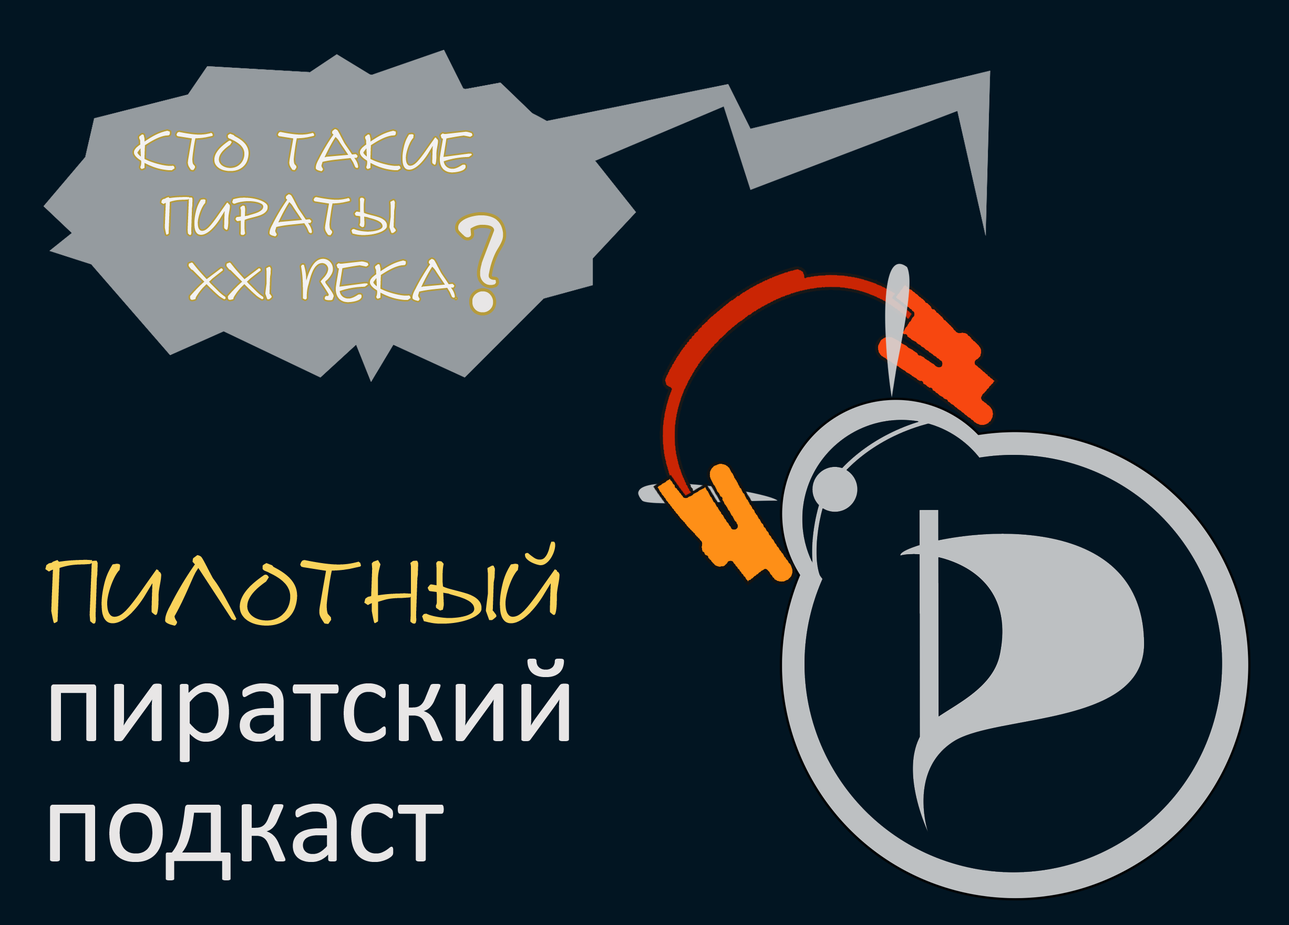
<style>
.page{position:relative;width:1289px;height:925px;background:#021522}
.page>*{position:absolute;margin:0}
.t1{font:53.9px "DSNote";color:#f3f2f2}
.t2{font:0.9px "DSNote";color:#f3f2f2}
.t3{font:131.3px "DSNote";color:#e8e6e6}
.t4{font:91px "DSNote";color:#fad35b}
.t5{font:121.5px "Calibri";color:#e8e6e6}
</style>
<div class="page">
<p class="t1" style="left:134px;top:129px;width:338px;height:174px">кто такие <br> пираты <br>  XXI века<span class="t2">?</span></p>
<p class="t3" style="left:458px;top:215px;width:45px;height:98px">?</p>
<p class="t4" style="left:45px;top:542px;width:515px;height:84px">Пилотный</p>
<p class="t5" style="left:51px;top:658px;width:518px;height:104px">пиратский</p>
<p class="t5" style="left:50px;top:804px;width:394px;height:77px">подкаст</p>
</div>
